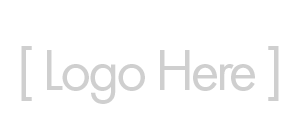
<style>
.page{position:relative;width:300px;height:129px;background:#ffffff}
.page>*{position:absolute;margin:0}
.t1{font:60px "FuturaT-Book";letter-spacing:-0.06em;color:#cfcfcf}
</style>
<div class="page">
<p class="t1" style="left:21px;top:46px;width:258px;height:58px">[ Logo Here ]</p>
</div>
